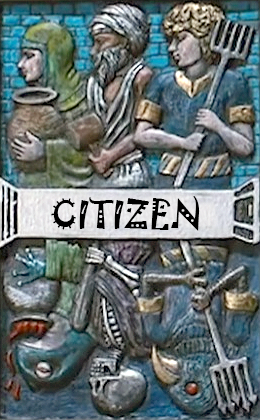
<style>
.page{position:relative;width:260px;height:420px}
.page>*{position:absolute;margin:0}
.t1{font:36px "Jokerman-Regular";color:#000000}
</style>
<div class="page">
<p class="t1" style="left:51px;top:196px;width:149px;height:35px">CITIZEN</p>
</div>
